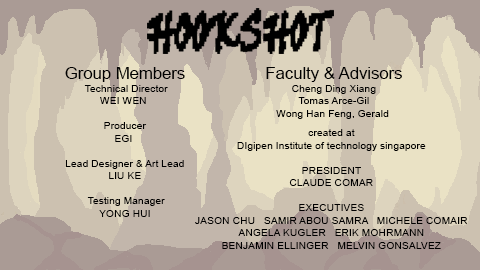
<style>
.page{position:relative;width:480px;height:270px;background:#ccc1b0}
.page>*{position:absolute;margin:0}
.t1{font:10.4px "ArialMT";color:#000000}
.t2{font:16.7px "ArialMT";color:#000000}
</style>
<div class="page">
<p class="t1" style="left:65px;top:67px;width:120px;height:150px;text-align:center"><span class="t2">Group Members<br></span> Technical Director<br>WEI WEN <br><br>Producer<br>EGI <br><br>Lead Designer &amp; Art Lead<br>LIU KE<br><br> Testing Manager<br>YONG HUI</p>
<p class="t1" style="left:266px;top:67px;width:136px;height:52px;text-align:center"><span class="t2">Faculty &amp; Advisors<br></span>Cheng Ding Xiang<br>Tomas Arce-Gil<br>Wong Han Feng, Gerald</p>
<p class="t1" style="left:195px;top:129px;width:273px;height:120px;text-align:center">created at<br>DIgipen Institute of technology singapore<br><br>PRESIDENT<br>CLAUDE COMAR<br><br>EXECUTIVES<br>JASON CHU   SAMIR ABOU SAMRA   MICHELE COMAIR<br>ANGELA KUGLER   ERIK MOHRMANN<br>BENJAMIN ELLINGER   MELVIN GONSALVEZ</p>
</div>
